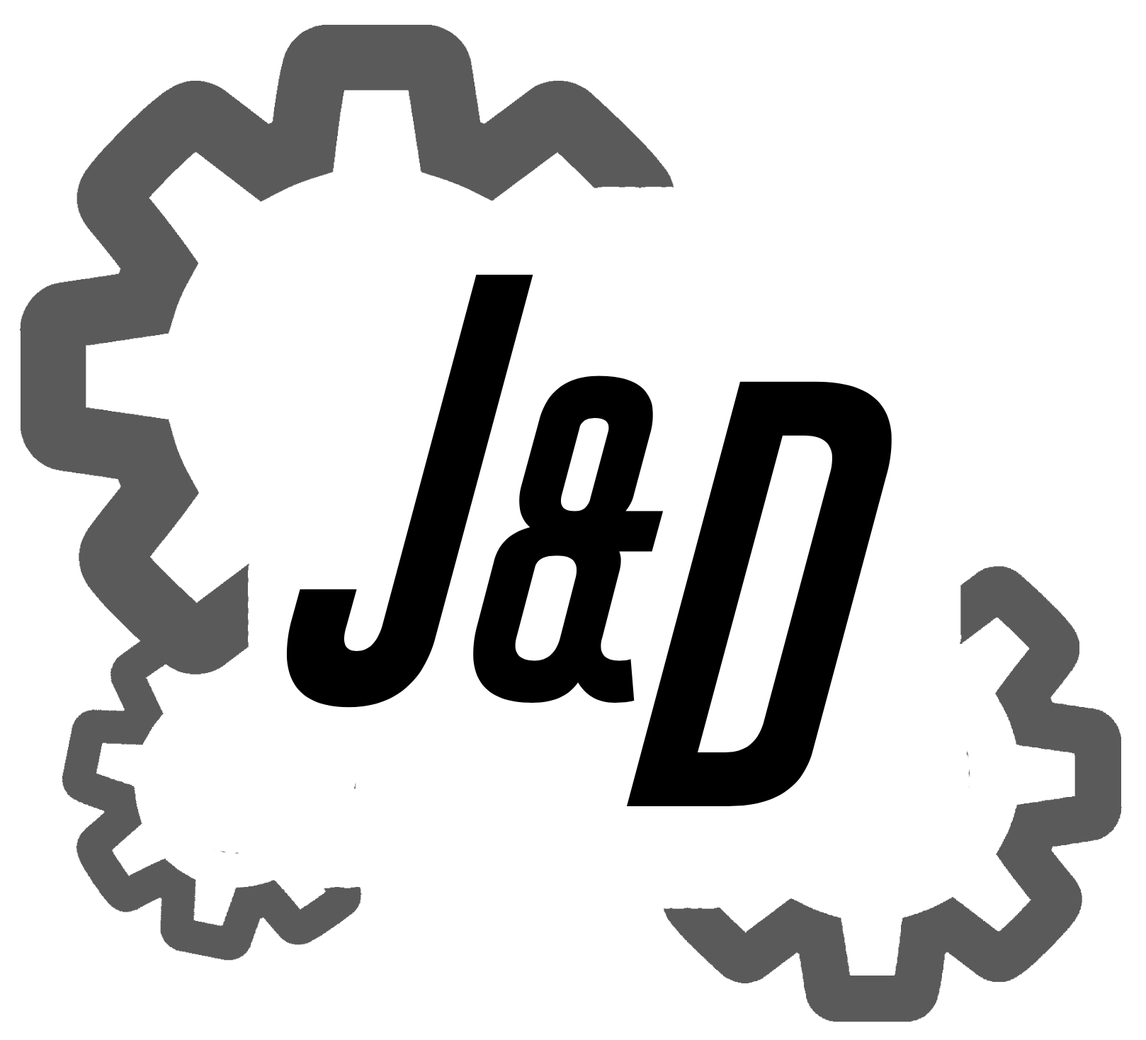
<style>
.page{position:relative;width:1146px;height:1040px;background:#ffffff}
.page>*{position:absolute;margin:0}
.t1{font:566.8px "AirAmerica-Regular";color:#000000}
.t2{font:425.1px "AirAmerica-Regular";color:#000000}
</style>
<div class="page">
<p class="t1" style="left:276px;top:274px;width:258px;height:434px">J</p>
<p class="t2" style="left:464px;top:376px;width:200px;height:327px">&amp;</p>
<p class="t1" style="left:626px;top:381px;width:278px;height:425px">D</p>
</div>
